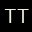
<style>
.page{position:relative;width:32px;height:32px;background:#000000}
.page>*{position:absolute;margin:0}
.t1{font:19.9px "BanglaSangamMN";color:#f0ede5}
</style>
<div class="page">
<p class="t1" style="left:4px;top:9px;width:25px;height:14px">TT</p>
</div>
